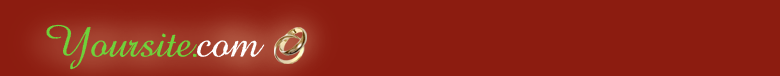
<style>
.page{position:relative;width:780px;height:76px;background:#8c1c10}
.page>*{position:absolute;margin:0}
.t1{font:29.8px "Abbeyline";color:#6fd23a}
.t2{font:29.8px "Abbeyline";color:#ffffff}
</style>
<div class="page">
<p class="t1" style="left:46px;top:24px;width:219px;height:46px">Yoursite.<span class="t2">com</span></p>
</div>
